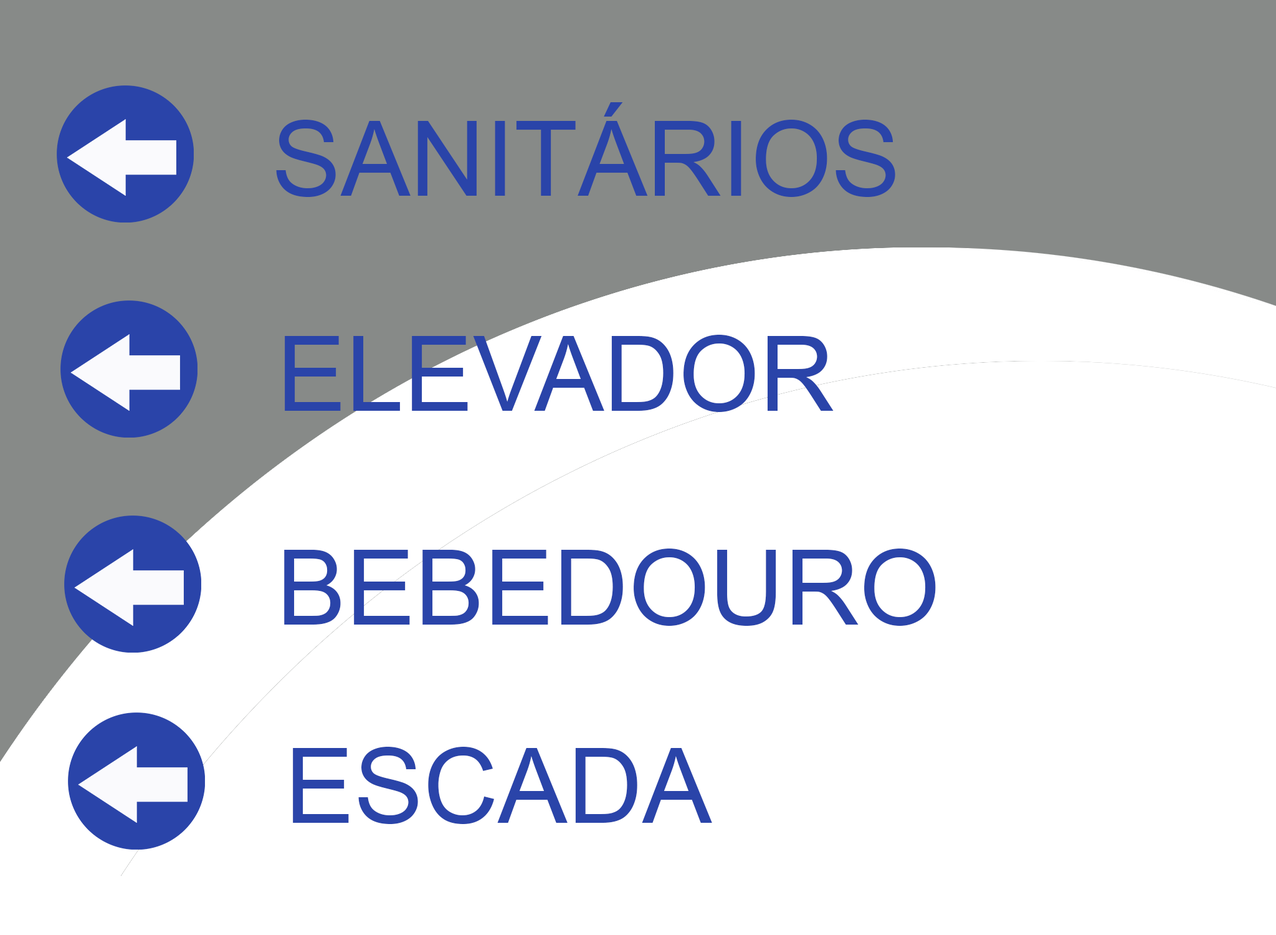
<style>
.page{position:relative;width:1276px;height:935px;background:#ffffff}
.page>*{position:absolute;margin:0}
.t1{font:103.8px "ArialMT";color:#2a44a9}
</style>
<div class="page">
<p class="t1" style="left:276px;top:102px;width:619px;height:95px">SANITÁRIOS</p>
<p class="t1" style="left:285px;top:335px;width:549px;height:77px">ELEVADOR</p>
<p class="t1" style="left:284px;top:548px;width:652px;height:78px">BEBEDOURO</p>
<p class="t1" style="left:293px;top:746px;width:419px;height:78px">ESCADA</p>
</div>
